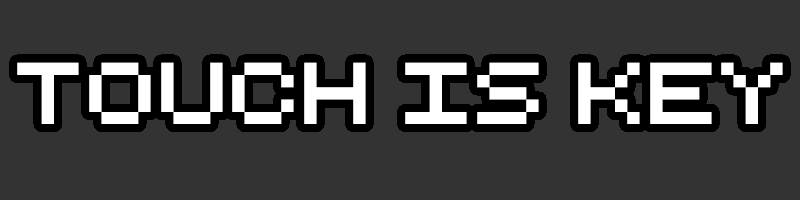
<style>
.page{position:relative;width:800px;height:200px;background:#333333}
.page>*{position:absolute;margin:0}
.t1{font:85px "RetroComputer";color:#ffffff}
</style>
<div class="page">
<p class="t1" style="left:17px;top:62px;width:766px;height:62px">Touch is key</p>
</div>
